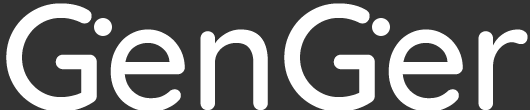
<style>
.page{position:relative;width:530px;height:110px;background:#333333}
.page>*{position:absolute;margin:0}
.t1{font:150px "Quicksand-Medium";color:#ffffff}
</style>
<div class="page">
<p class="t1" style="left:6px;top:3px;width:522px;height:109px">GenGer</p>
</div>
